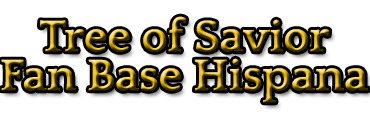
<style>
.page{position:relative;width:370px;height:120px;background:#ffffff}
.page>*{position:absolute;margin:0}
.t1{font:46px/39px "Quattrocento-Bold"}
</style>
<div class="page">
<p class="t1" style="left:1px;top:16px;width:367px;height:87px;text-align:center">Tree of Savior<br>Fan Base Hispana</p>
</div>
